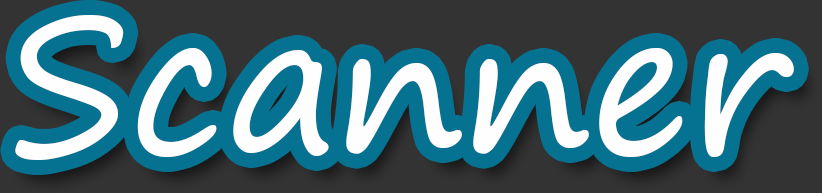
<style>
.page{position:relative;width:822px;height:193px;background:#333333}
.page>*{position:absolute;margin:0}
.t1{font:190.5px "SegoePrint";color:#fefefe}
</style>
<div class="page">
<p class="t1" style="left:15px;top:15px;width:779px;height:145px">Scanner</p>
</div>
